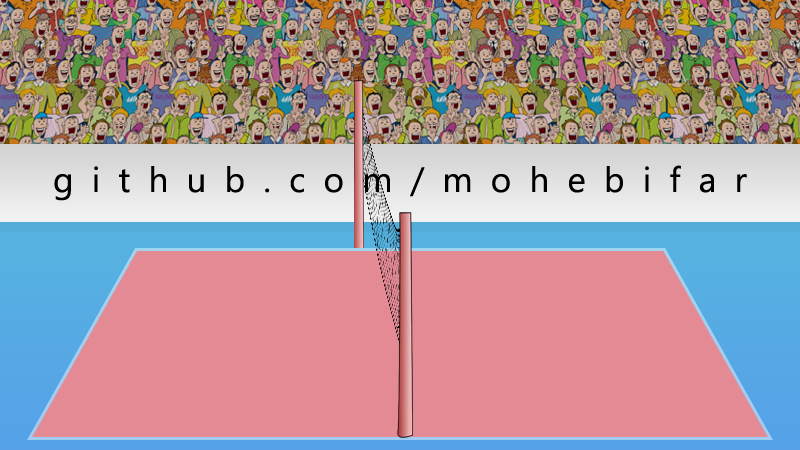
<style>
.page{position:relative;width:800px;height:450px;background:#e48a95}
.page>*{position:absolute;margin:0}
.t1{font:35px "SegoeUI";letter-spacing:0.52em;color:#000000}
</style>
<div class="page">
<p class="t1" style="left:54px;top:165px;width:693px;height:36px">github.com/mohebifar</p>
</div>
